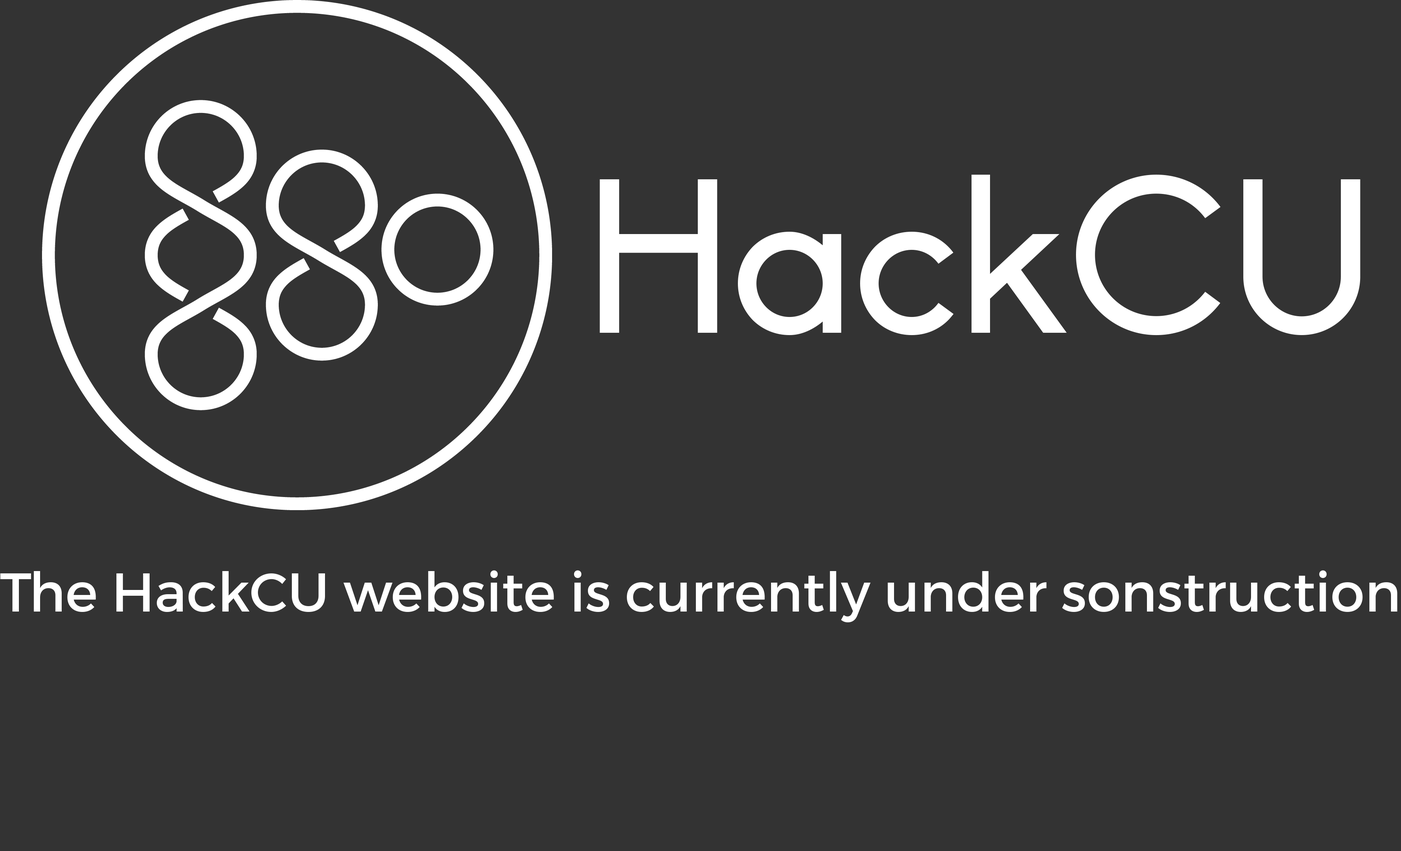
<style>
.page{position:relative;width:1401px;height:851px;background:#333333}
.page>*{position:absolute;margin:0}
.t1{font:54.6px "Montserrat-Regular";color:#ffffff}
</style>
<div class="page">
<p class="t1" style="left:0px;top:570px;width:1398px;height:52px">The HackCU website is currently under sonstruction</p>
</div>
